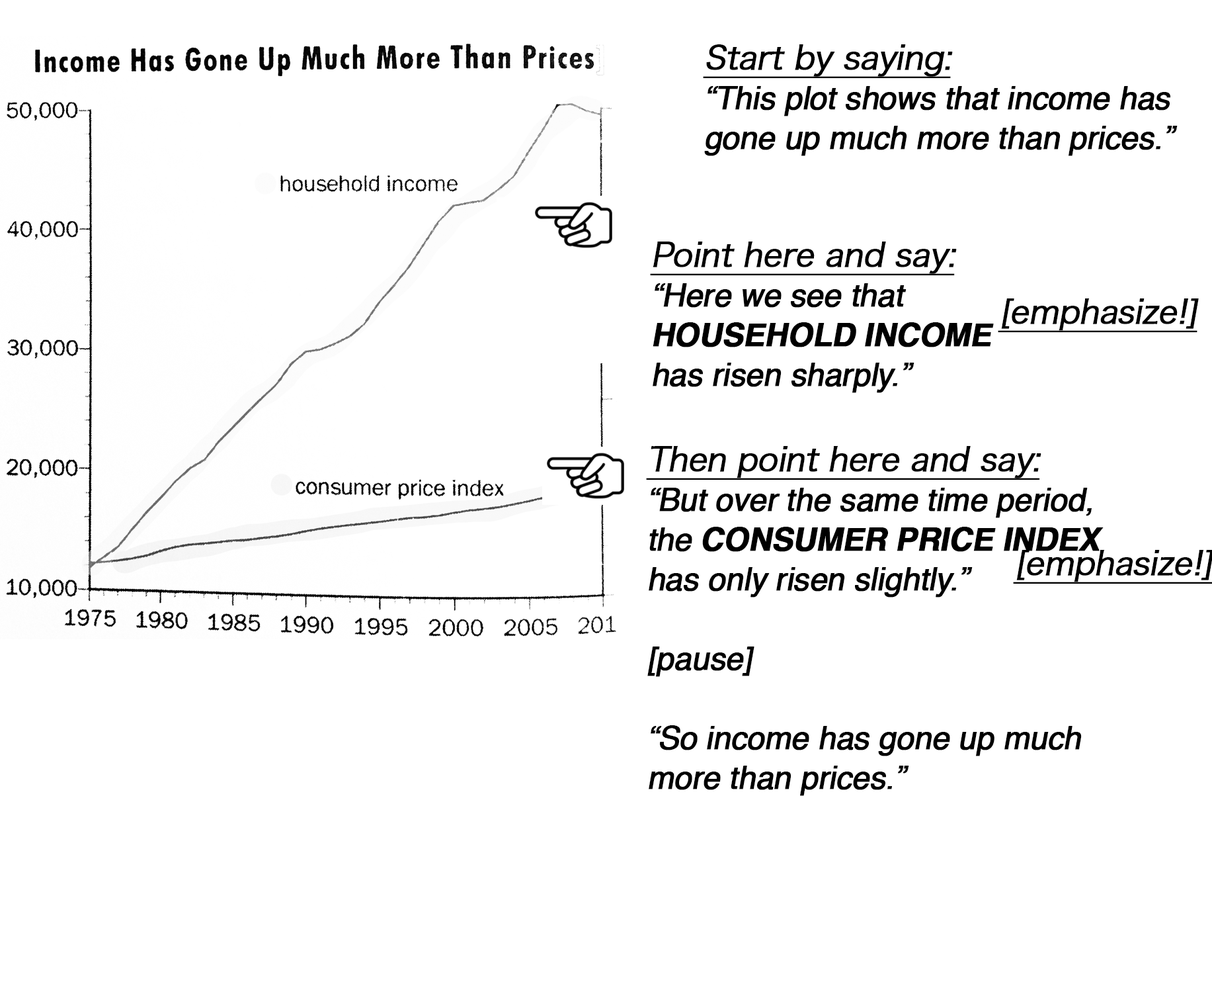
<style>
.page{position:relative;width:1212px;height:984px;background:#ffffff}
.page>*{position:absolute;margin:0}
.t1{font:31.7px/39.7px "Helvetica";letter-spacing:-0.025em;color:#000000;font-weight:bold;font-style:italic}
.t2{font:31.7px/39.7px "HiraKakuProN-W3";letter-spacing:-0.025em;color:#000000;font-weight:bold;font-style:italic;text-decoration:underline}
.t3{font:31.7px/39.7px "Helvetica-Bold";letter-spacing:-0.025em;color:#000000;font-weight:bold;font-style:italic}
.t4{font:31.7px "HiraKakuProN-W3";letter-spacing:-0.025em;color:#000000;font-weight:bold;font-style:italic;text-decoration:underline}
</style>
<div class="page">
<p class="t1" style="left:703px;top:44px;width:475px;height:112px"><span class="t2">Start by saying:<br></span>“This plot shows that income has gone up much more than prices.”</p>
<p class="t2" style="left:650px;top:241px;width:344px;height:152px">Point here and say:<br><span class="t1">“Here we see that <br></span><span class="t3">HOUSEHOLD INCOME<br></span><span class="t1">has risen sharply.”</span></p>
<p class="t4" style="left:998px;top:298px;width:201px;height:35px">[emphasize!]</p>
<p class="t1" style="left:646px;top:446px;width:458px;height:350px"><span class="t2">Then point here and say:<br></span>“But over the same time period,<br>the <span class="t3">CONSUMER PRICE INDEX </span>has only risen slightly.”<br><br>[pause]<br><br>“So income has gone up much more than prices.”</p>
</div>
